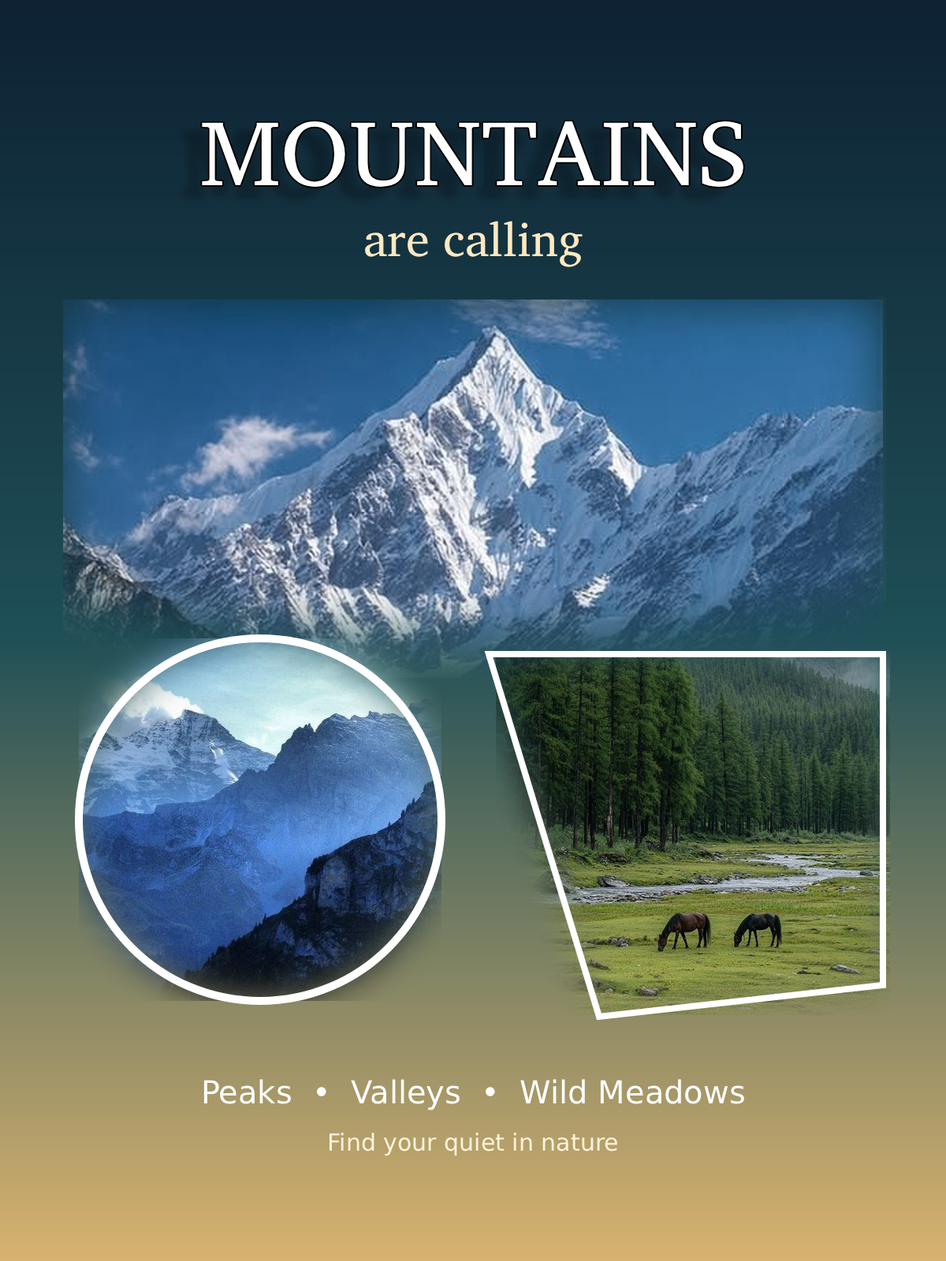
<style>
.page{position:relative;width:946px;height:1261px}
.page>*{position:absolute;margin:0}
.t1{font:93px "Georgia";color:#ffffff}
.t2{font:47.3px "Georgia";color:#ffe8c2}
.t3{font:31.5px "Arial";color:#ffffff}
.t4{font:23.6px "Arial";color:#fff4dc}
</style>
<div class="page">
<p class="t1" style="left:202px;top:121px;width:541px;height:66px">MOUNTAINS</p>
<p class="t2" style="left:365px;top:221px;width:217px;height:46px">are calling</p>
<p class="t3" style="left:203px;top:1079px;width:541px;height:31px">Peaks  •  Valleys  •  Wild Meadows</p>
<p class="t4" style="left:329px;top:1132px;width:288px;height:24px">Find your quiet in nature</p>
</div>
